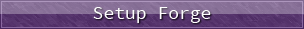
<style>
.page{position:relative;width:304px;height:29px}
.page>*{position:absolute;margin:0}
.t1{font:18px "SourceCodePro-Regular";color:#ffffff}
</style>
<div class="page">
<p class="t1" style="left:93px;top:7px;width:118px;height:16px">Setup Forge</p>
</div>
